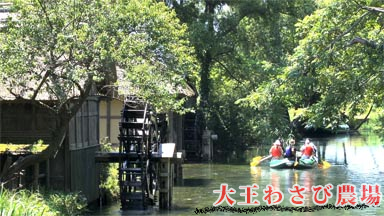
<style>
.page{position:relative;width:384px;height:216px}
.page>*{position:absolute;margin:0}
.t1{font:21px "KozMinPr6N-Heavy";letter-spacing:0.16em;color:#e0473d}
</style>
<div class="page">
<p class="t1" style="left:214px;top:184px;width:167px;height:22px">大王わさび農場</p>
</div>
